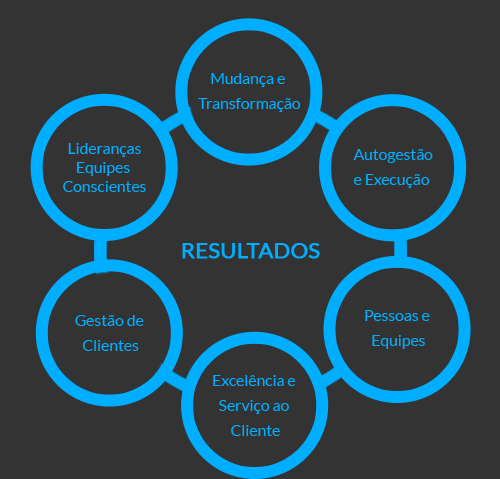
<style>
.page{position:relative;width:500px;height:479px;background:#333333}
.page>*{position:absolute;margin:0}
.t1{font:15.7px/25.4px "Lato-Regular";color:#00aeff}
.t2{font:15.7px "Lato-Regular";color:#00aeff}
.t3{font:21.6px "Lato-Regular";color:#00aeff;font-weight:bold}
</style>
<div class="page">
<p class="t1" style="left:198px;top:73px;width:103px;height:39px;text-align:center">Mudança e <br>Transformação</p>
<p class="t2" style="left:63px;top:143px;width:83px;height:49px;text-align:center">Lideranças<br>Equipes <br>Conscientes</p>
<p class="t1" style="left:353px;top:149px;width:80px;height:39px">Autogestão <br>e Execução</p>
<p class="t3" style="left:182px;top:243px;width:138px;height:16px">RESULTADOS</p>
<p class="t1" style="left:75px;top:315px;width:69px;height:36px;text-align:center">Gestão de <br>Clientes</p>
<p class="t1" style="left:365px;top:310px;width:65px;height:39px;text-align:center">Pessoas e <br>Equipes</p>
<p class="t1" style="left:213px;top:375px;width:83px;height:61px;text-align:center">Excelência e <br>Serviço ao <br>Cliente</p>
</div>
